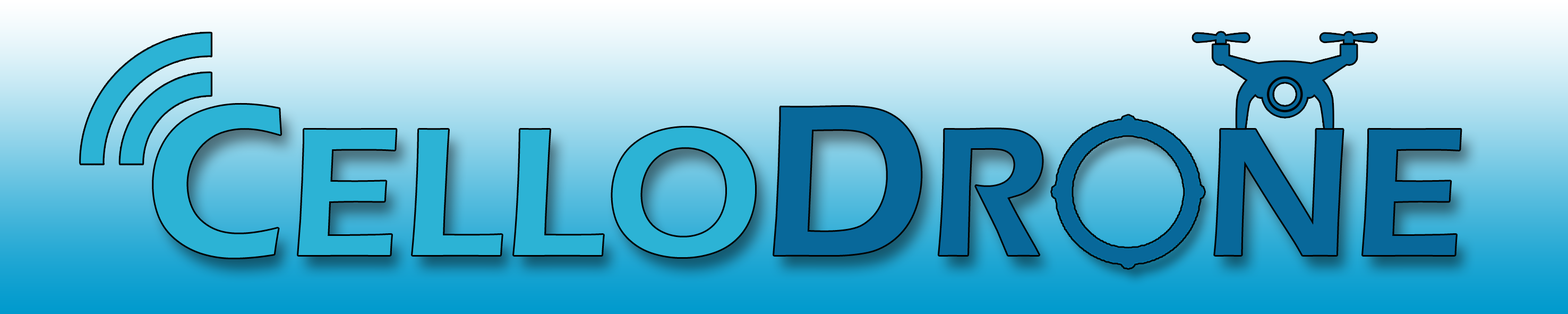
<style>
.page{position:relative;width:1568px;height:314px}
.page>*{position:absolute;margin:0}
.t1{font:188.1px "ErasITC-Demi";color:#2cb3d5}
.t2{font:221.2px "ErasITC-Demi";color:#2cb3d5}
.t3{font:221.2px "ErasITC-Demi";color:#08689a}
.t4{font:188.1px "ErasITC-Demi";color:#08689a}
</style>
<div class="page">
<p class="t1" style="left:153px;top:104px;width:1308px;height:154px"><span class="t2">C</span>ELLO<span class="t3">D</span><span class="t4">R NE</span></p>
</div>
